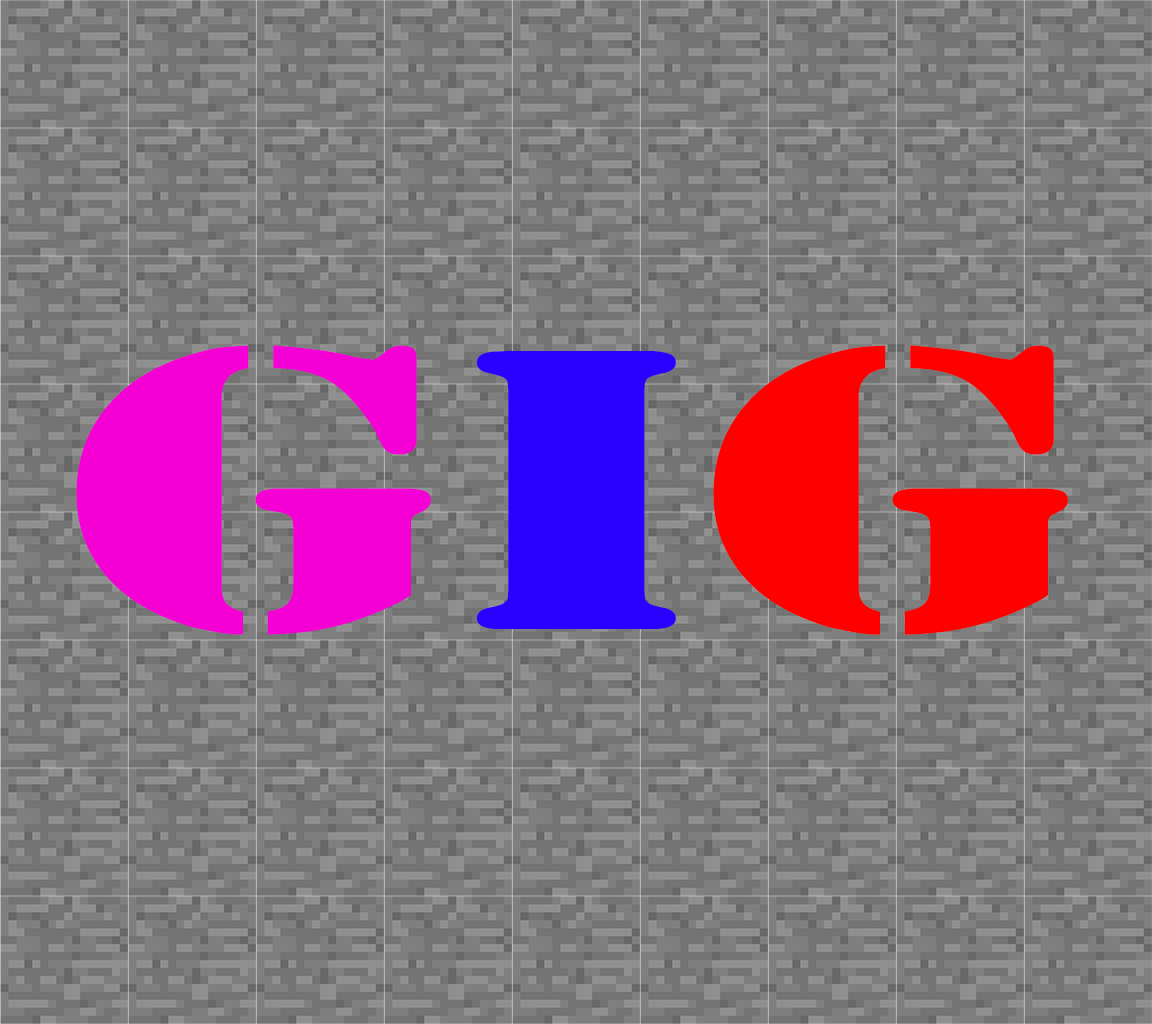
<style>
.page{position:relative;width:1152px;height:1024px}
.page>*{position:absolute;margin:0}
.t1{font:416.7px "ArmyExpanded";color:#f400d4}
.t2{font:416.7px "ArmyExpanded";color:#2a00fe}
.t3{font:416.7px "ArmyExpanded";color:#ff0000}
</style>
<div class="page">
<p class="t1" style="left:76px;top:345px;width:992px;height:290px">G<span class="t2">I</span><span class="t3">G</span></p>
</div>
